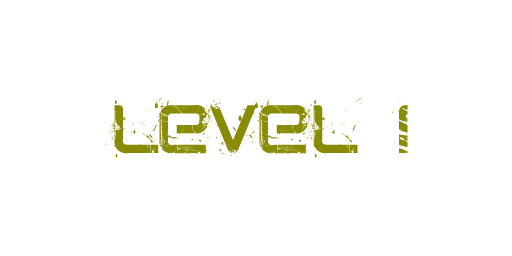
<style>
.page{position:relative;width:512px;height:256px;background:#ffffff}
.page>*{position:absolute;margin:0}
.t1{font:48px "CRUSHED";color:#898b05}
</style>
<div class="page">
<p class="t1" style="left:105px;top:98px;width:303px;height:60px">level 1</p>
</div>
